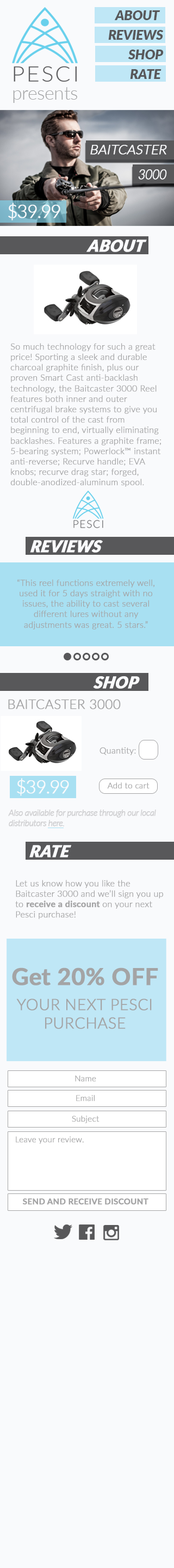
<style>
.page{position:relative;width:174px;height:1568px;background:#f9fafc}
.page>*{position:absolute;margin:0}
.t1{font:13.6px "Lato-BlackItalic";letter-spacing:-0.015em;color:#58585a}
.t2{font:18.7px "Lato-Light";letter-spacing:-0.015em;color:#a4a5a6}
.t3{font:13.1px "Lato-Light";letter-spacing:-0.01em;color:#f9fafc;font-weight:bold;font-style:italic}
.t4{font:14.2px "Lato-Light";letter-spacing:-0.01em;color:#f9fafc;font-weight:bold;font-style:italic;scale:0.83 1}
.t5{font:18px "Lato-Light";letter-spacing:-0.05em;color:#f9fafc;font-weight:bold}
.t6{font:16.3px "Lato-BlackItalic";color:#f9fafc;font-weight:bold;font-style:italic}
.t7{font:8.7px "Lato-Light";color:#a4a4a5;font-weight:bold}
.t8{font:13.1px "Lato-Light";color:#a4a4a5;font-weight:bold}
.t9{font:8.2px "Lato-Light";color:#a4a4a5;font-weight:bold}
.t10{font:8.7px "Lato-LightItalic";letter-spacing:-0.05em;color:#cfcfd1;font-weight:bold}
.t11{font:8.7px "Lato-Bold";color:#a4a4a5;font-weight:bold}
.t12{font:15.5px "Lato-Light";color:#a4a4a5;font-weight:bold}
.t13{font:23.3px "Lato-Bold";color:#a4a4a5;font-weight:bold}
.t14{font:8.2px "Lato-Bold";color:#a4a4a5;font-weight:bold}
</style>
<div class="page">
<p class="t1" style="left:114px;top:10px;width:47px;height:10px">ABOUT</p>
<p class="t1" style="left:108px;top:30px;width:56px;height:10px">REVIEWS</p>
<p class="t1" style="left:128px;top:50px;width:36px;height:9px">SHOP</p>
<p class="t1" style="left:130px;top:69px;width:32px;height:10px">RATE</p>
<p class="t2" style="left:13px;top:87px;width:64px;height:16px">presents</p>
<p class="t3" style="left:90px;top:145px;width:77px;height:10px">BAITCASTER</p>
<p class="t4" style="left:138px;top:169px;width:29px;height:11px">3000</p>
<p class="t5" style="left:8px;top:203px;width:52px;height:17px">$39.99</p>
<p class="t6" style="left:87px;top:240px;width:60px;height:12px">ABOUT</p>
<p class="t7" style="left:10px;top:343px;width:151px;height:144px">So much technology for such a great price! Sporting a sleek and durable charcoal graphite finish, plus our proven Smart Cast anti-backlash technology, the Baitcaster 3000 Reel features both inner and outer centrifugal brake systems to give you total control of the cast from beginning to end, virtually eliminating backlashes. Features a graphite frame; 5-bearing system; Powerlock™ instant anti-reverse; Recurve handle; EVA knobs; recurve drag star; forged, double-anodized-aluminum spool.</p>
<p class="t6" style="left:30px;top:540px;width:73px;height:13px">REVIEWS</p>
<p class="t7" style="left:17px;top:579px;width:138px;height:50px;text-align:center">“This reel functions extremely well, used it for 5 days straight with no issues, the ability to cast several different lures without any adjustments was great. 5 stars.”</p>
<p class="t6" style="left:93px;top:676px;width:47px;height:13px">SHOP</p>
<p class="t8" style="left:8px;top:699px;width:113px;height:10px">BAITCASTER 3000</p>
<p class="t7" style="left:100px;top:747px;width:36px;height:8px">Quantity:</p>
<p class="t5" style="left:17px;top:778px;width:52px;height:18px">$39.99</p>
<p class="t9" style="left:107px;top:782px;width:43px;height:7px">Add to cart</p>
<p class="t10" style="left:8px;top:810px;width:148px;height:16px">Also available for purchase through our local<br>distributors here.</p>
<p class="t6" style="left:29px;top:845px;width:42px;height:12px">RATE</p>
<p class="t7" style="left:15px;top:880px;width:148px;height:39px">Let us know how you like the Baitcaster 3000 and we’ll sign you up to <span class="t11">receive a discount </span>on your next Pesci purchase!</p>
<p class="t12" style="left:12px;top:967px;width:146px;height:62px;text-align:center"><span class="t13">Get 20% OFF <br><br></span>YOUR NEXT PESCI PURCHASE</p>
<p class="t9" style="left:75px;top:1075px;width:21px;height:7px">Name</p>
<p class="t9" style="left:76px;top:1095px;width:19px;height:6px">Email</p>
<p class="t9" style="left:72px;top:1116px;width:28px;height:7px">Subject</p>
<p class="t9" style="left:16px;top:1136px;width:68px;height:8px">Leave your review.</p>
<p class="t14" style="left:22px;top:1198px;width:127px;height:7px">SEND AND RECEIVE DISCOUNT</p>
</div>
